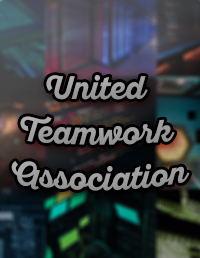
<style>
.page{position:relative;width:200px;height:258px}
.page>*{position:absolute;margin:0}
.t1{font:30px/42px "SantEliaScript-BoldDMO";color:#9c9c9c}
</style>
<div class="page">
<p class="t1" style="left:11px;top:75px;width:179px;height:116px;text-align:center">United <br>Teamwork <br>Association</p>
</div>
